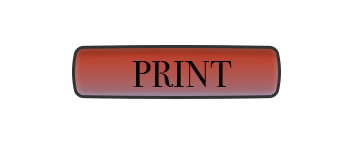
<style>
.page{position:relative;width:364px;height:150px;background:#ffffff}
.page>*{position:absolute;margin:0}
.t1{font:37.5px "BodoniSvtyTwoSCITCTT-Book";color:#050403}
</style>
<div class="page">
<p class="t1" style="left:132px;top:61px;width:100px;height:26px">PRINT</p>
</div>
